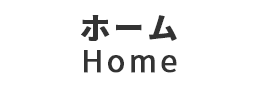
<style>
.page{position:relative;width:260px;height:89px;background:#ffffff}
.page>*{position:absolute;margin:0}
.t1{font:30px "SourceHanSansJP-Bold";letter-spacing:0.1em;color:#333333;font-weight:bold}
.t2{font:30px "SourceHanSansJP-Regular";letter-spacing:0.1em;color:#333333;font-weight:bold}
</style>
<div class="page">
<p class="t1" style="left:81px;top:15px;width:96px;height:26px">ホーム</p>
<p class="t2" style="left:84px;top:50px;width:93px;height:23px">Home</p>
</div>
